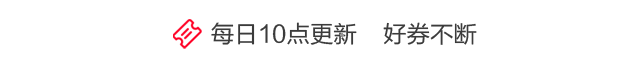
<style>
.page{position:relative;width:640px;height:65px;background:#ffffff}
.page>*{position:absolute;margin:0}
.t1{font:23.5px "FZLTHK--GBK1-0";color:#3b3b3b}
</style>
<div class="page">
<p class="t1" style="left:211px;top:22px;width:266px;height:23px">每日10点更新    好券不断</p>
</div>
